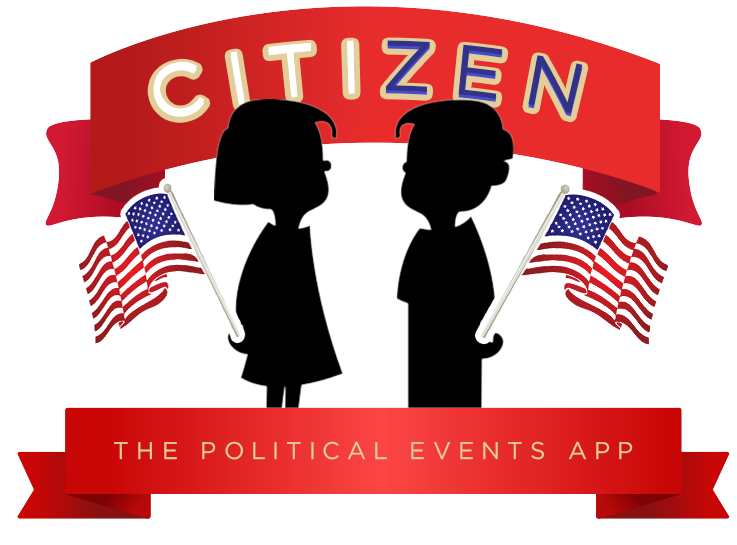
<style>
.page{position:relative;width:737px;height:545px;background:#ffffff}
.page>*{position:absolute;margin:0}
.t1{font:71.1px "Gotham-Book";letter-spacing:0.3em;color:#ffffff}
.t2{font:71.1px "Gotham-Book";letter-spacing:0.3em;color:#323289}
.t3{font:71.1px "Gotham-Book";letter-spacing:0.3em}
.t4{font:24.1px "Gotham-Book";letter-spacing:0.3em;color:#e3ce9a}
</style>
<div class="page">
<p class="t1" style="left:153px;top:40px;width:430px;height:74px">CITI<span class="t2">ZEN</span></p>
<p class="t3" style="left:153px;top:43px;width:430px;height:74px">CITIZEN</p>
<p class="t4" style="left:114px;top:441px;width:519px;height:19px">THE POLITICAL EVENTS APP</p>
</div>
